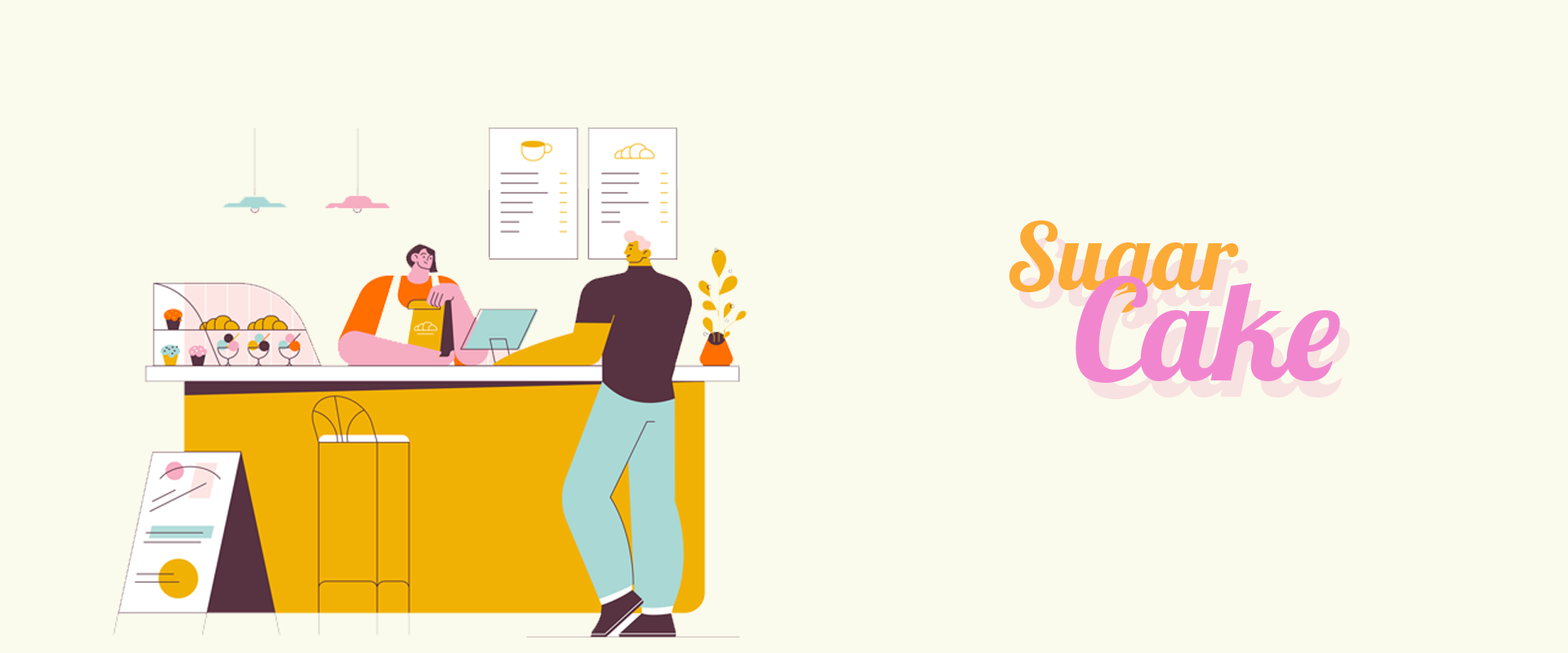
<style>
.page{position:relative;width:1568px;height:653px;background:#fbfbed}
.page>*{position:absolute;margin:0}
.t1{font:93.1px "Lobster-Regular";color:#fcab37}
.t2{font:139.7px "Lobster-Regular";color:#f186cf}
</style>
<div class="page">
<p class="t1" style="left:1009px;top:220px;width:230px;height:93px">Sugar</p>
<p class="t2" style="left:1076px;top:276px;width:264px;height:107px">Cake</p>
</div>
